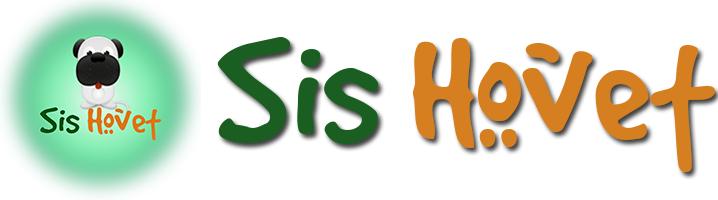
<style>
.page{position:relative;width:718px;height:200px;background:#ffffff}
.page>*{position:absolute;margin:0}
.t1{font:166px "GoodDogCool";color:#d57f20}
.t2{font:166px "GoodDogCool";color:#1a5e21}
</style>
<div class="page">
<p class="t1" style="left:217px;top:37px;width:498px;height:135px"><span class="t2">Sis </span>Hovet</p>
</div>
